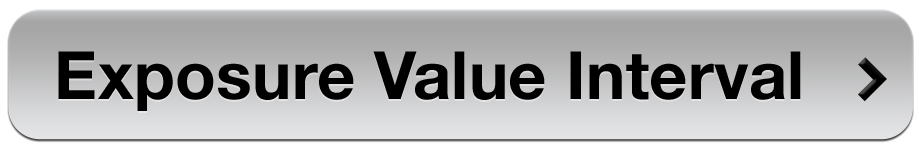
<style>
.page{position:relative;width:919px;height:146px}
.page>*{position:absolute;margin:0}
.t1{font:66.5px "HelveticaNeue-Bold";letter-spacing:0.005em;color:#000000}
</style>
<div class="page">
<p class="t1" style="left:58px;top:51px;width:743px;height:60px">Exposure Value Interval</p>
</div>
